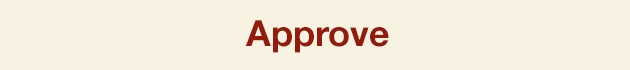
<style>
.page{position:relative;width:630px;height:70px;background:#f8f2e3}
.page>*{position:absolute;margin:0}
.t1{font:36px "HelveticaNeue-Bold";color:#931b0c}
</style>
<div class="page">
<p class="t1" style="left:245px;top:20px;width:144px;height:33px">Approve</p>
</div>
